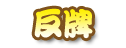
<style>
.page{position:relative;width:126px;height:48px;background:#ffffff}
.page>*{position:absolute;margin:0}
.t1{font:31.9px "TKanTingLiu-Ultra";scale:0.95 1}
</style>
<div class="page">
<p class="t1" style="left:34px;top:8px;width:59px;height:31px">反牌</p>
</div>
